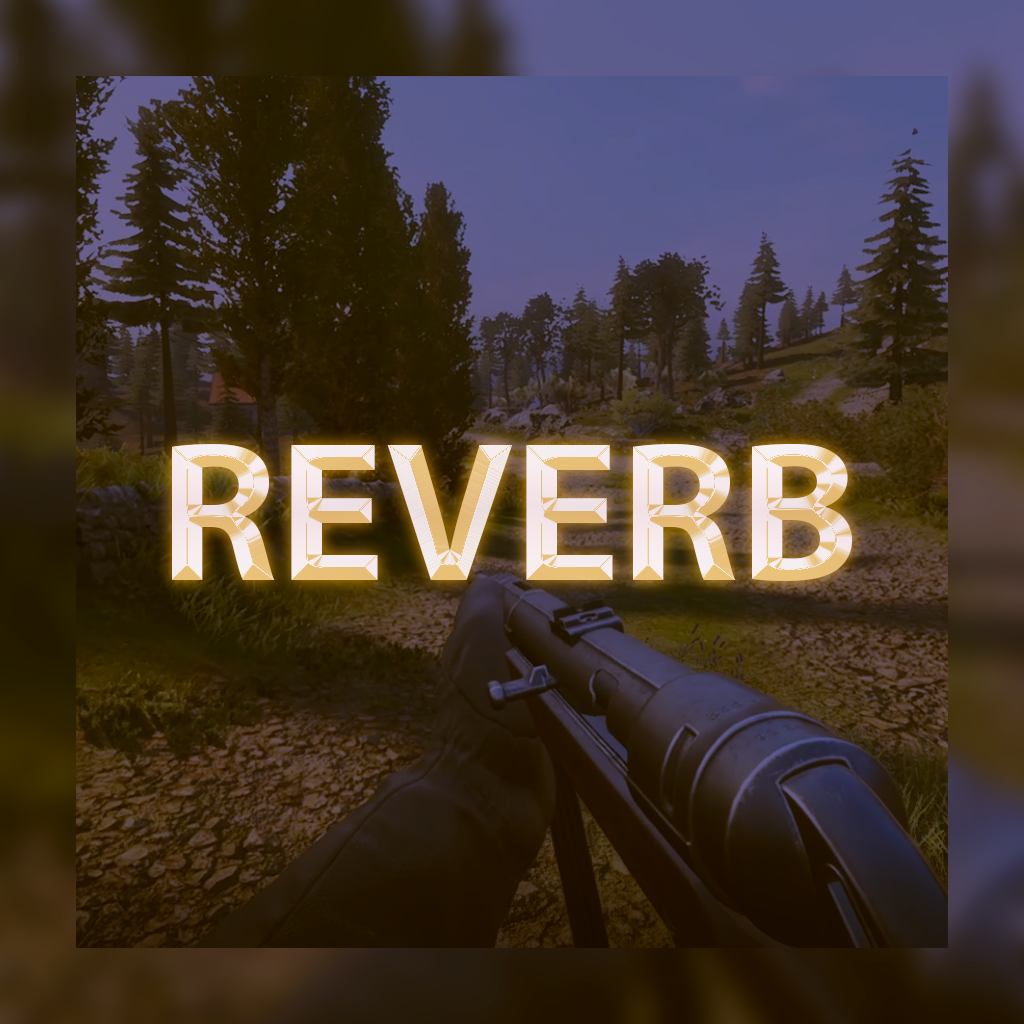
<style>
.page{position:relative;width:1024px;height:1024px}
.page>*{position:absolute;margin:0}
.t1{font:200px "MyriadPro-Bold"}
</style>
<div class="page">
<p class="t1" style="left:172px;top:443px;width:680px;height:138px">REVERB</p>
</div>
